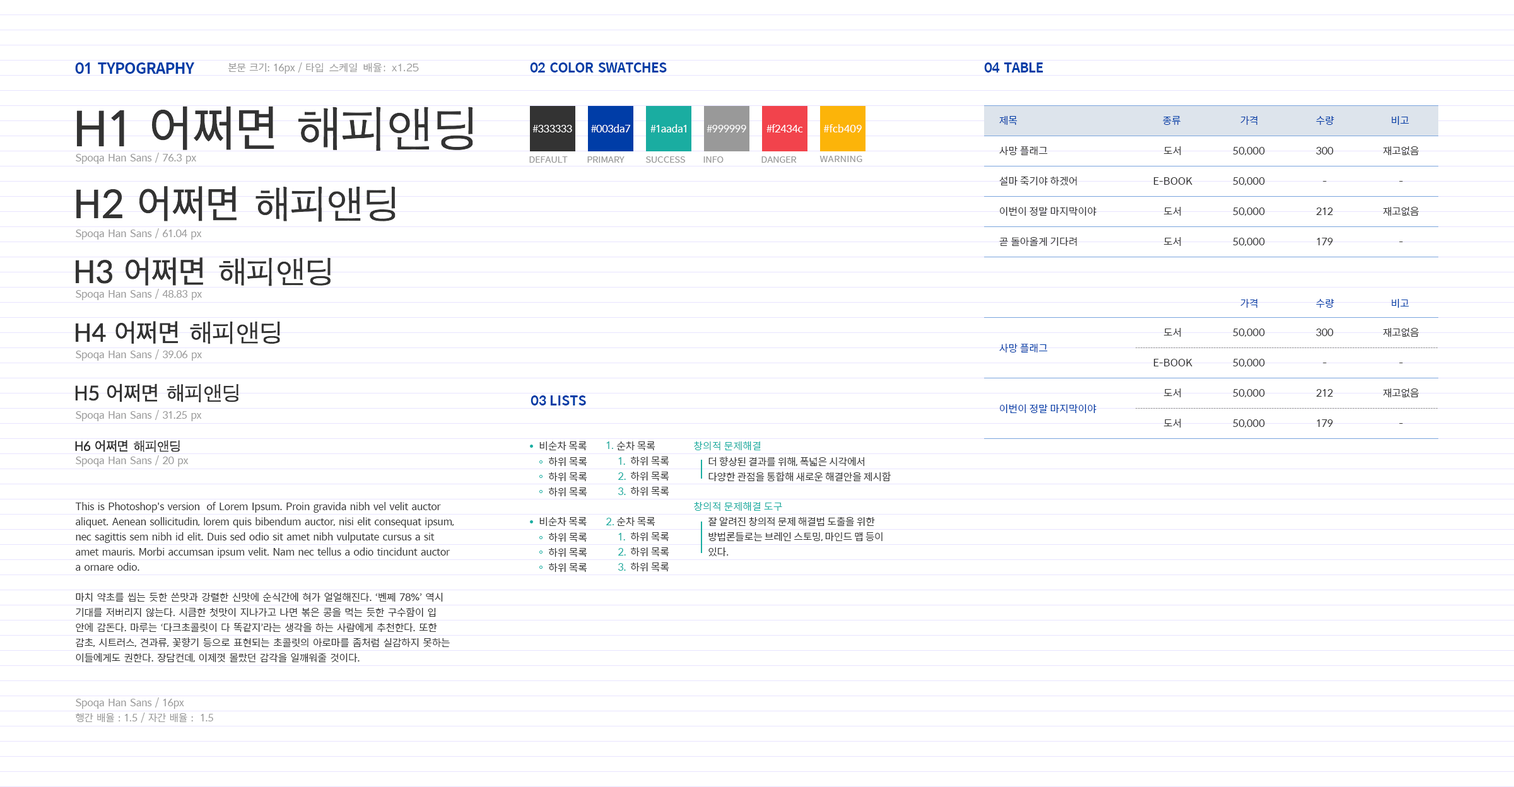
<style>
.page{position:relative;width:1514px;height:787px;background:#ffffff}
.page>*{position:absolute;margin:0}
.t1{font:15.1px "SpoqaHanSans-Bold";color:#003da7}
.t2{font:10.1px "SpoqaHanSans-Regular";color:#999999}
.t3{font:10.1px "AppleGothic";color:#999999}
.t4{font:13.3px "SpoqaHanSans-Bold";color:#003da7}
.t5{font:13.3px "SpoqaHanSans-Bold";color:#003da7;text-transform:uppercase}
.t6{font:48.1px "SpoqaHanSans-Regular";color:#333333;text-transform:uppercase}
.t7{font:48.1px "AppleGothic";color:#333333;text-transform:uppercase}
.t8{font:10.1px "SpoqaHanSans-Regular";color:#ffffff}
.t9{font:10.1px "SpoqaHanSans-Regular";letter-spacing:-0.025em;color:#003da7;text-transform:uppercase}
.t10{font:10.1px "SpoqaHanSans-Regular";color:#333333}
.t11{font:10.1px "SpoqaHanSans-Regular";color:#333333;text-transform:uppercase}
.t12{font:10.1px "SpoqaHanSans-Regular";letter-spacing:-0.025em;color:#333333;text-transform:uppercase}
.t13{font:8.8px "SpoqaHanSans-Regular";color:#999999;text-transform:uppercase}
.t14{font:38.5px "SpoqaHanSans-Regular";color:#333333;text-transform:uppercase}
.t15{font:38.5px "AppleGothic";color:#333333;text-transform:uppercase}
.t16{font:30.8px "SpoqaHanSans-Regular";color:#333333;text-transform:uppercase}
.t17{font:30.8px "AppleGothic";color:#333333;text-transform:uppercase}
.t18{font:24.6px "SpoqaHanSans-Regular";color:#333333;text-transform:uppercase}
.t19{font:24.6px "AppleGothic";color:#333333;text-transform:uppercase}
.t20{font:10.1px "SpoqaHanSans-Regular";color:#003da7;text-transform:uppercase}
.t21{font:19.7px "SpoqaHanSans-Regular";color:#333333;text-transform:uppercase}
.t22{font:19.7px "AppleGothic";color:#333333;text-transform:uppercase}
.t23{font:12.6px "SpoqaHanSans-Regular";color:#333333;text-transform:uppercase}
.t24{font:12.6px "AppleGothic";color:#333333;text-transform:uppercase}
.t25{font:10.1px "SpoqaHanSans-Regular";letter-spacing:-0.01em;color:#333333;text-transform:uppercase}
.t26{font:10.1px "SpoqaHanSans-Regular";letter-spacing:-0.01em;color:#1aada1;text-transform:uppercase}
.t27{font:10.1px "SpoqaHanSans-Regular";letter-spacing:0.01em;color:#1aada1}
.t28{font:10.1px "SpoqaHanSans-Regular";letter-spacing:-0.025em;color:#1aada1;text-transform:uppercase}
.t29{font:10.1px "SpoqaHanSans-Regular";letter-spacing:-0.02em;color:#333333}
</style>
<div class="page">
<p class="t1" style="left:75px;top:62px;width:120px;height:12px">01 TYPOGRAPHY</p>
<p class="t2" style="left:228px;top:62px;width:191px;height:12px">본문 크기: 16px / 타<span class="t3">입 스케일 배율: x1.25</span></p>
<p class="t4" style="left:530px;top:62px;width:137px;height:11px">02 COLOR SWATCHES</p>
<p class="t5" style="left:984px;top:62px;width:60px;height:11px">04 Table</p>
<p class="t6" style="left:76px;top:106px;width:397px;height:45px">h1 어쩌면 <span class="t7">해피앤딩</span></p>
<p class="t8" style="left:533px;top:125px;width:39px;height:8px">#333333</p>
<p class="t8" style="left:591px;top:124px;width:40px;height:9px">#003da7</p>
<p class="t8" style="left:651px;top:124px;width:35px;height:9px">#1aada1</p>
<p class="t8" style="left:707px;top:125px;width:39px;height:8px">#999999</p>
<p class="t8" style="left:767px;top:124px;width:36px;height:9px">#f2434c</p>
<p class="t8" style="left:824px;top:124px;width:38px;height:9px">#fcb409</p>
<p class="t9" style="left:999px;top:116px;width:19px;height:9px">제목</p>
<p class="t9" style="left:1163px;top:116px;width:18px;height:9px">종류</p>
<p class="t9" style="left:1240px;top:116px;width:18px;height:9px">가격</p>
<p class="t9" style="left:1316px;top:116px;width:18px;height:9px">수량</p>
<p class="t9" style="left:1392px;top:116px;width:18px;height:9px">비고</p>
<p class="t10" style="left:999px;top:146px;width:98px;height:101px">사망 플래그<br>설마 죽기야 하겠어<br><span class="t11">이번이 정말 마지막이야<br></span>곧 돌아올게 기다려</p>
<p class="t12" style="left:1154px;top:146px;width:39px;height:100px;text-align:center">도서<br>e-book<br>도서<br>도서</p>
<p class="t11" style="left:1233px;top:147px;width:32px;height:99px">50,000<br>50,000<br>50,000<br>50,000</p>
<p class="t12" style="left:1316px;top:147px;width:18px;height:98px;text-align:center">300<br>-<br>212<br>179</p>
<p class="t12" style="left:1383px;top:146px;width:36px;height:96px;text-align:center">재고없음<br>-<br>재고없음<br>-</p>
<p class="t2" style="left:76px;top:153px;width:120px;height:11px">Spoqa Han Sans / 76.3 px</p>
<p class="t13" style="left:529px;top:156px;width:39px;height:7px">default</p>
<p class="t13" style="left:587px;top:156px;width:38px;height:7px">primary</p>
<p class="t13" style="left:645px;top:156px;width:40px;height:7px">success</p>
<p class="t13" style="left:704px;top:156px;width:20px;height:7px">info</p>
<p class="t13" style="left:762px;top:156px;width:35px;height:7px">danger</p>
<p class="t13" style="left:820px;top:156px;width:43px;height:6px">warning</p>
<p class="t14" style="left:76px;top:186px;width:320px;height:36px">h2 어쩌면 <span class="t15">해피앤딩</span></p>
<p class="t2" style="left:76px;top:228px;width:126px;height:12px">Spoqa Han Sans / 61.04 px</p>
<p class="t16" style="left:75px;top:257px;width:256px;height:29px">h3 어쩌면 <span class="t17">해피앤딩</span></p>
<p class="t2" style="left:76px;top:289px;width:126px;height:11px">Spoqa Han Sans / 48.83 px</p>
<p class="t9" style="left:1240px;top:299px;width:18px;height:9px">가격</p>
<p class="t9" style="left:1316px;top:299px;width:18px;height:9px">수량</p>
<p class="t9" style="left:1392px;top:299px;width:18px;height:9px">비고</p>
<p class="t18" style="left:75px;top:321px;width:205px;height:24px">h4 어쩌면 <span class="t19">해피앤딩</span></p>
<p class="t12" style="left:1154px;top:328px;width:39px;height:100px;text-align:center">도서<br>e-book<br>도서<br>도서</p>
<p class="t11" style="left:1233px;top:329px;width:32px;height:99px">50,000<br>50,000<br>50,000<br>50,000</p>
<p class="t12" style="left:1316px;top:329px;width:18px;height:98px;text-align:center">300<br>-<br>212<br>179</p>
<p class="t12" style="left:1383px;top:328px;width:36px;height:96px;text-align:center">재고없음<br>-<br>재고없음<br>-</p>
<p class="t2" style="left:76px;top:350px;width:126px;height:11px">Spoqa Han Sans / 39.06 px</p>
<p class="t20" style="left:999px;top:344px;width:98px;height:69px">사망 플래그<br><br>이번이 정말 마지막이야</p>
<p class="t21" style="left:75px;top:384px;width:164px;height:19px">h5 어쩌면 <span class="t22">해피앤딩</span></p>
<p class="t5" style="left:531px;top:396px;width:55px;height:10px">03 lists</p>
<p class="t2" style="left:76px;top:410px;width:126px;height:11px">Spoqa Han Sans / 31.25 px</p>
<p class="t23" style="left:75px;top:440px;width:105px;height:12px">h6 어쩌면 <span class="t24">해피앤딩</span></p>
<p class="t25" style="left:539px;top:442px;width:48px;height:9px">비순차 목록</p>
<p class="t26" style="left:606px;top:442px;width:7px;height:7px">1.</p>
<p class="t25" style="left:616px;top:442px;width:40px;height:9px">순차 목록</p>
<p class="t27" style="left:694px;top:442px;width:67px;height:9px">창의적 문제해결</p>
<p class="t2" style="left:76px;top:456px;width:113px;height:11px">Spoqa Han Sans / 20 px</p>
<p class="t25" style="left:548px;top:457px;width:39px;height:40px">하위 목록<br>하위 목록<br>하위 목록</p>
<p class="t28" style="left:618px;top:457px;width:8px;height:38px">1.<br>2.<br>3.</p>
<p class="t25" style="left:630px;top:457px;width:39px;height:39px">하위 목록<br>하위 목록<br>하위 목록</p>
<p class="t29" style="left:709px;top:457px;width:182px;height:25px">더 향상된 결과를 위해, 폭넓은 시각에서 다양한 관점을 통합해 새로운 해결안을 제시함</p>
<p class="t10" style="left:75px;top:502px;width:379px;height:161px">This is Photoshop's version  of Lorem Ipsum. Proin gravida nibh vel velit auctor aliquet. Aenean sollicitudin, lorem quis bibendum auctor, nisi elit consequat ipsum, nec sagittis sem nibh id elit. Duis sed odio sit amet nibh vulputate cursus a sit amet mauris. Morbi accumsan ipsum velit. Nam nec tellus a odio tincidunt auctor a ornare odio. <br>마치 약초를 씹는 듯한 쓴맛과 강렬한 신맛에 순식간에 혀가 얼얼해진다. ‘벤쩨 78%’ 역시 기대를 저버리지 않는다. 시큼한 첫맛이 지나가고 나면 볶은 콩을 먹는 듯한 구수함이 입 안에 감돈다. 마루는 ‘다크초콜릿이 다 똑같지’라는 생각을 하는 사람에게 추천한다. 또한 감초, 시트러스, 견과류, 꽃향기 등으로 표현되는 초콜릿의 아로마를 좀처럼 실감하지 못하는 이들에게도 권한다. 장담컨데, 이제껏 몰랐던 감각을 일깨워줄 것이다.</p>
<p class="t27" style="left:694px;top:502px;width:88px;height:9px">창의적 문제해결 도구</p>
<p class="t25" style="left:539px;top:517px;width:48px;height:9px">비순차 목록</p>
<p class="t26" style="left:606px;top:518px;width:8px;height:8px">2.</p>
<p class="t25" style="left:616px;top:517px;width:40px;height:9px">순차 목록</p>
<p class="t29" style="left:709px;top:517px;width:174px;height:40px">잘 알려진 창의적 문제 해결법 도출을 위한 방법론들로는 브레인 스토밍, 마인드 맵 등이 있다.</p>
<p class="t25" style="left:548px;top:533px;width:39px;height:39px">하위 목록<br>하위 목록<br>하위 목록</p>
<p class="t28" style="left:618px;top:533px;width:8px;height:38px">1.<br>2.<br>3.</p>
<p class="t25" style="left:630px;top:533px;width:39px;height:39px">하위 목록<br>하위 목록<br>하위 목록</p>
<p class="t2" style="left:75px;top:698px;width:138px;height:25px">Spoqa Han Sans / 16px<br>행간 배율 : 1.5 / 자간 배율 :  1.5</p>
</div>
